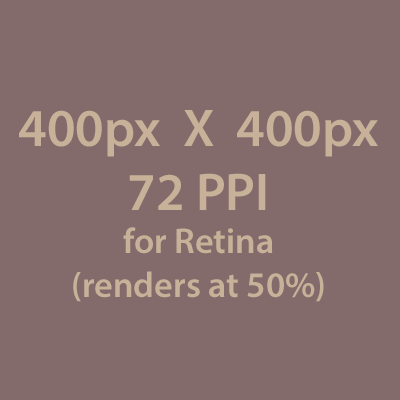
<style>
.page{position:relative;width:400px;height:400px;background:#846b6b}
.page>*{position:absolute;margin:0}
.t1{font:36px "MyriadPro-Semibold";color:#c7b299}
.t2{font:53.3px "MyriadPro-Semibold";color:#c7b299}
</style>
<div class="page">
<p class="t1" style="left:19px;top:110px;width:359px;height:192px;text-align:center"><span class="t2">400px  X  400px<br>72 PPI<br></span>for Retina<br>(renders at 50%)</p>
</div>
